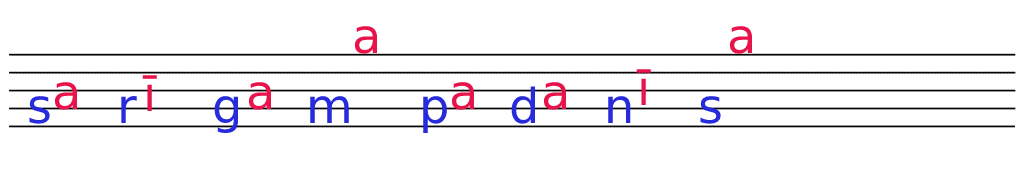
<style>
.page{position:relative;width:1024px;height:173px;background:#ffffff}
.page>*{position:absolute;margin:0}
.t1{font:48px "DejaVuSans";color:#e8134a}
.t2{font:48px "DejaVuSans";color:#272bdc}
</style>
<div class="page">
<p class="t1" style="left:354px;top:26px;width:24px;height:28px">a</p>
<p class="t1" style="left:729px;top:26px;width:24px;height:28px">a</p>
<p class="t1" style="left:142px;top:75px;width:15px;height:36px">ī</p>
<p class="t1" style="left:636px;top:69px;width:15px;height:36px">ī</p>
<p class="t1" style="left:54px;top:82px;width:24px;height:28px">a</p>
<p class="t1" style="left:248px;top:82px;width:24px;height:28px">a</p>
<p class="t1" style="left:451px;top:82px;width:24px;height:28px">a</p>
<p class="t2" style="left:511px;top:86px;width:25px;height:38px">d</p>
<p class="t1" style="left:543px;top:82px;width:24px;height:28px">a</p>
<p class="t2" style="left:29px;top:96px;width:21px;height:28px">s</p>
<p class="t2" style="left:121px;top:96px;width:16px;height:27px">r</p>
<p class="t2" style="left:214px;top:96px;width:25px;height:37px">g</p>
<p class="t2" style="left:310px;top:96px;width:39px;height:27px">m</p>
<p class="t2" style="left:423px;top:96px;width:24px;height:37px">p</p>
<p class="t2" style="left:608px;top:96px;width:23px;height:27px">n</p>
<p class="t2" style="left:700px;top:96px;width:21px;height:28px">s</p>
</div>
